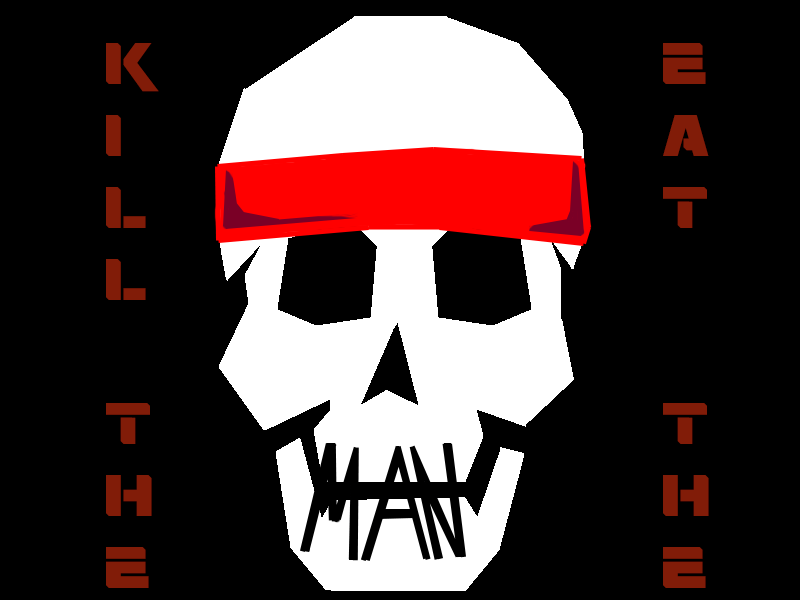
<style>
.page{position:relative;width:800px;height:600px;background:#000000}
.page>*{position:absolute;margin:0}
.t1{font:60px "Rebellion";color:#811c08}
</style>
<div class="page">
<p class="t1" style="left:106px;top:43px;width:53px;height:545px">K<br>I<br>L<br>L<br><br>T<br>H<br>E</p>
<p class="t1" style="left:663px;top:43px;width:46px;height:545px">E<br>A<br>T<br><br><br>T<br>H<br>E</p>
</div>
